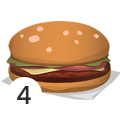
<style>
.page{position:relative;width:120px;height:120px;background:#ffffff}
.page>*{position:absolute;margin:0}
.t1{font:24px "Poppins-Medium";letter-spacing:0.06em;color:#2c2c2c;text-transform:uppercase}
</style>
<div class="page">
<p class="t1" style="left:17px;top:86px;width:14px;height:18px">4</p>
</div>
